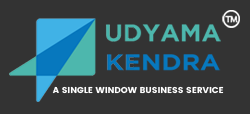
<style>
.page{position:relative;width:250px;height:114px;background:#333333}
.page>*{position:absolute;margin:0}
.t1{font:8.5px "Poppins-Bold";color:#ffffff;scale:1.03 1}
</style>
<div class="page">
<p class="t1" style="left:52px;top:86px;width:172px;height:8px">A SINGLE WINDOW BUSINESS SERVICE</p>
</div>
